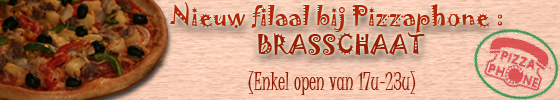
<style>
.page{position:relative;width:560px;height:100px}
.page>*{position:absolute;margin:0}
.t1{font:24px "Jokerman-Regular";color:#b42407}
.t2{font:24px "Jokerman-Regular";color:#9a1e06}
.t3{font:24px "JuiceITC-Regular";color:#891b05}
</style>
<div class="page">
<p class="t1" style="left:170px;top:2px;width:333px;height:53px;text-align:center">Nieuw filaal bij Pizzaphone : <br><span class="t2">BRASSCHAAT</span></p>
<p class="t3" style="left:248px;top:71px;width:168px;height:24px">(Enkel open van 17u-23u)</p>
</div>
